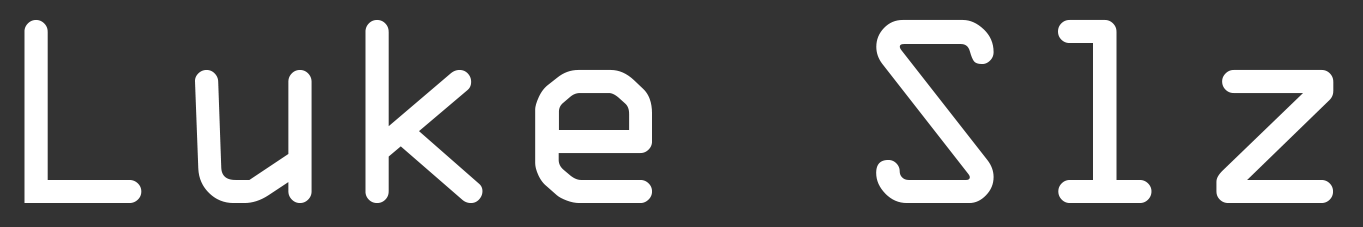
<style>
.page{position:relative;width:1363px;height:227px;background:#333333}
.page>*{position:absolute;margin:0}
.t1{font:282px "OCRAExtended";color:#ffffff}
</style>
<div class="page">
<p class="t1" style="left:24px;top:19px;width:1310px;height:184px">Luke Slz</p>
</div>
